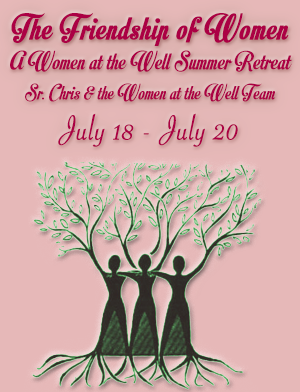
<style>
.page{position:relative;width:300px;height:392px;background:#e6b8b8}
.page>*{position:absolute;margin:0}
.t1{font:22px/30px "MotionPicturePersonalUse";color:#ab0044}
.t2{font:36px/38px "MotionPicturePersonalUse";color:#ab0044;font-weight:bold}
.t3{font:26px/30px "MotionPicturePersonalUse";color:#ab0044}
.t4{font:37px/40px "SavoyeLetPlain";color:#ab0044;font-weight:bold}
</style>
<div class="page">
<p class="t1" style="left:10px;top:13px;width:282px;height:134px;text-align:center"><span class="t2">The Friendship of Women<br></span><span class="t3">A Women at the Well Summer Retreat<br></span>Sr. Chris &amp; the Women at the Well Team<br><span class="t4">July 18 - July 20</span></p>
</div>
